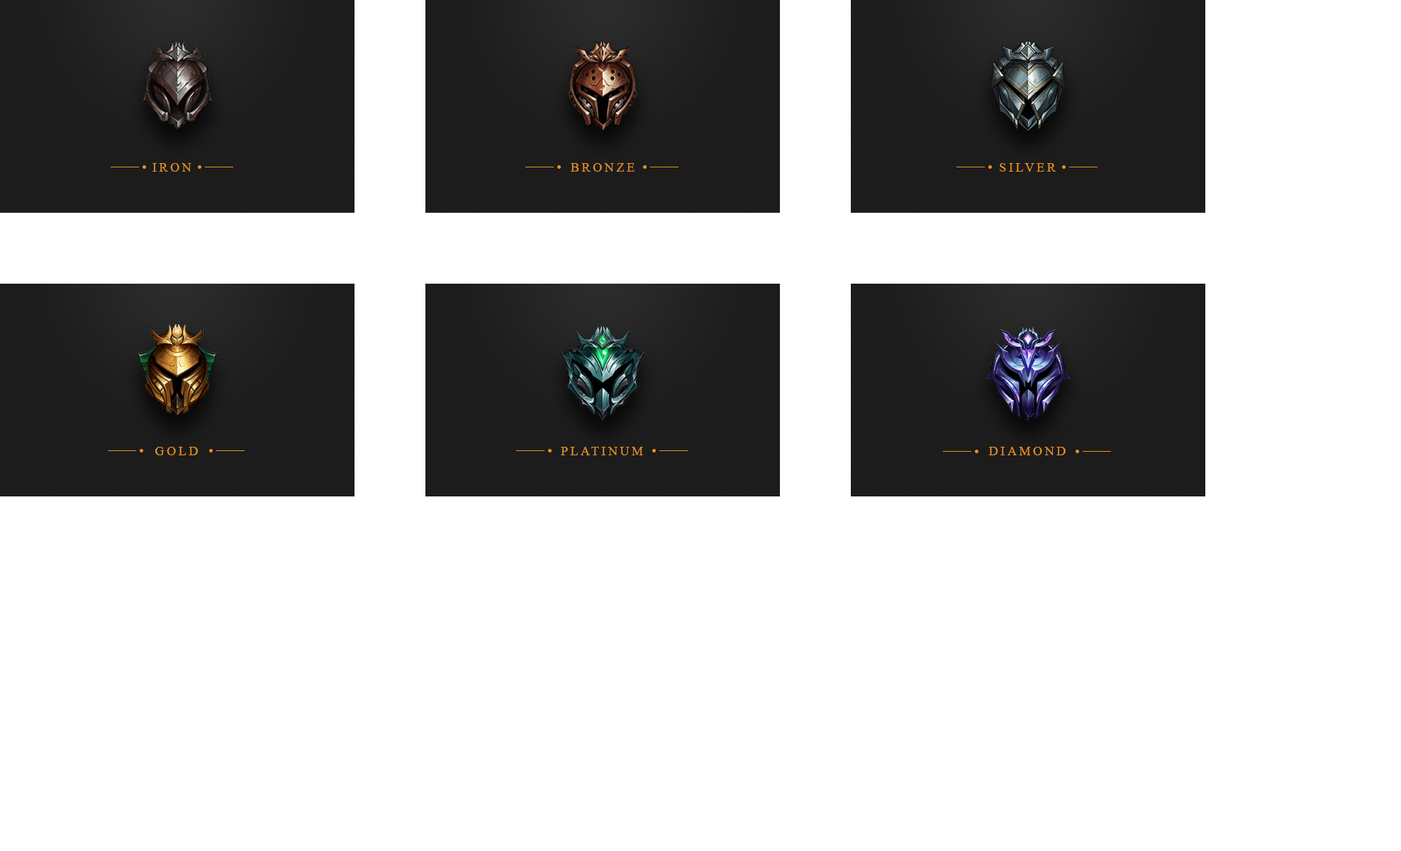
<style>
.page{position:relative;width:1401px;height:851px;background:#ffffff}
.page>*{position:absolute;margin:0}
.t1{font:12.8px "TimesNewRomanPSMT";letter-spacing:0.2em;color:#ec9123}
</style>
<div class="page">
<p class="t1" style="left:152px;top:163px;width:39px;height:9px">IRON</p>
<p class="t1" style="left:571px;top:163px;width:64px;height:9px">BRONZE</p>
<p class="t1" style="left:1000px;top:163px;width:56px;height:9px">SILVER</p>
<p class="t1" style="left:155px;top:447px;width:43px;height:8px">GOLD</p>
<p class="t1" style="left:561px;top:447px;width:82px;height:8px">PLATINUM</p>
<p class="t1" style="left:989px;top:447px;width:77px;height:8px">DIAMOND</p>
</div>
